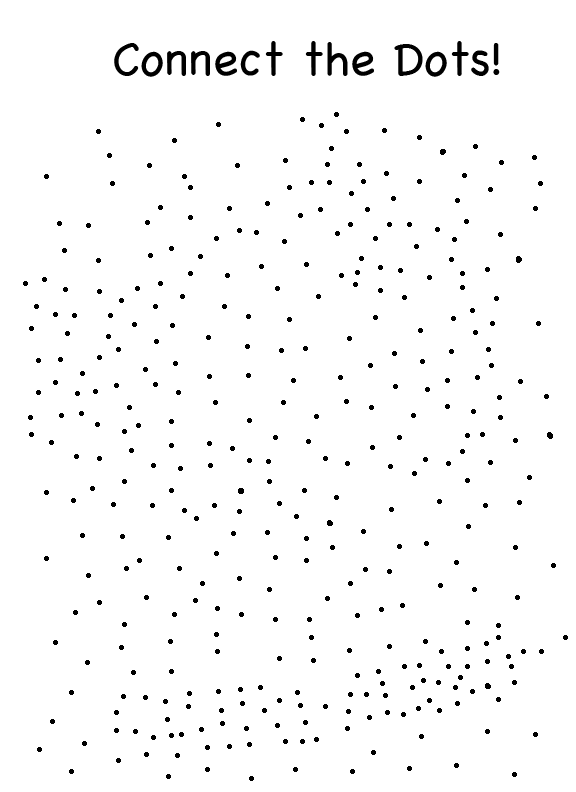
<style>
.page{position:relative;width:576px;height:792px;background:#ffffff}
.page>*{position:absolute;margin:0}
.t1{font:48px "Chalkboard";color:#000000}
</style>
<div class="page">
<p class="t1" style="left:114px;top:41px;width:386px;height:36px">Connect the Dots!</p>
</div>
